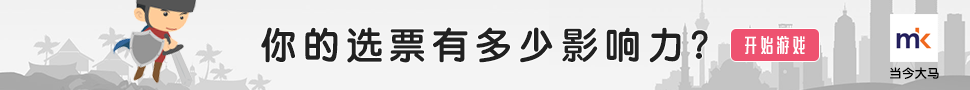
<style>
.page{position:relative;width:970px;height:90px}
.page>*{position:absolute;margin:0}
.t1{font:36px "STYuanti-SC-Bold";letter-spacing:0.2em;color:#212121}
.t2{font:18px "MFJiaHei_Noncommercial-Regular";letter-spacing:0.2em;color:#ffffff}
.t3{font:12px "STYuanti-SC-Bold";letter-spacing:0.05em;color:#000000}
</style>
<div class="page">
<p class="t1" style="left:261px;top:27px;width:447px;height:36px">你的选票有多少影响力？</p>
<p class="t2" style="left:745px;top:36px;width:60px;height:18px">开始游戏</p>
<p class="t3" style="left:890px;top:67px;width:49px;height:12px">当今大马</p>
</div>
